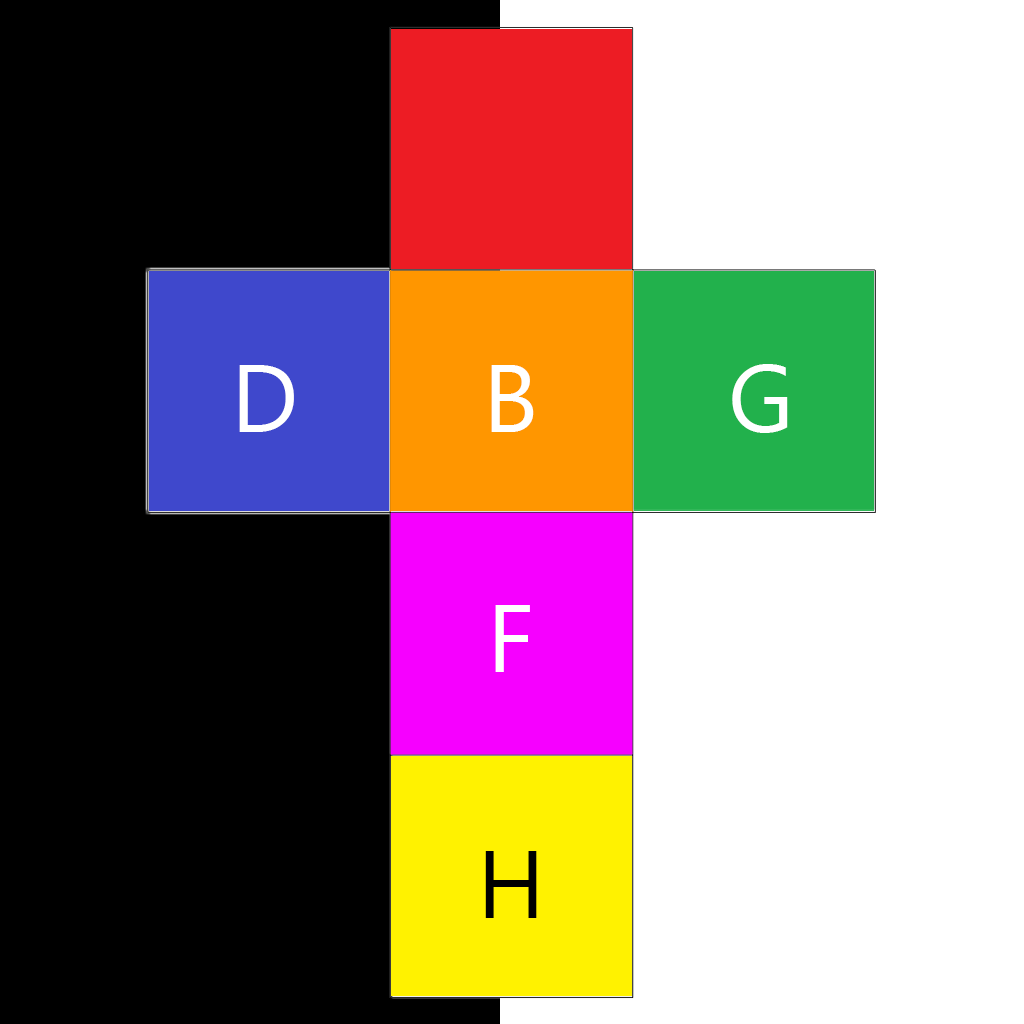
<style>
.page{position:relative;width:1024px;height:1024px;background:#ffffff}
.page>*{position:absolute;margin:0}
.t1{font:96px "SegoeUI";color:#ffffff}
.t2{font:96px "SegoeUI";color:#000000}
</style>
<div class="page">
<p class="t1" style="left:239px;top:365px;width:55px;height:67px">D</p>
<p class="t1" style="left:491px;top:365px;width:43px;height:67px">B</p>
<p class="t1" style="left:732px;top:364px;width:56px;height:69px">G</p>
<p class="t1" style="left:495px;top:605px;width:35px;height:67px">F</p>
<p class="t2" style="left:485px;top:851px;width:52px;height:67px">H</p>
</div>
